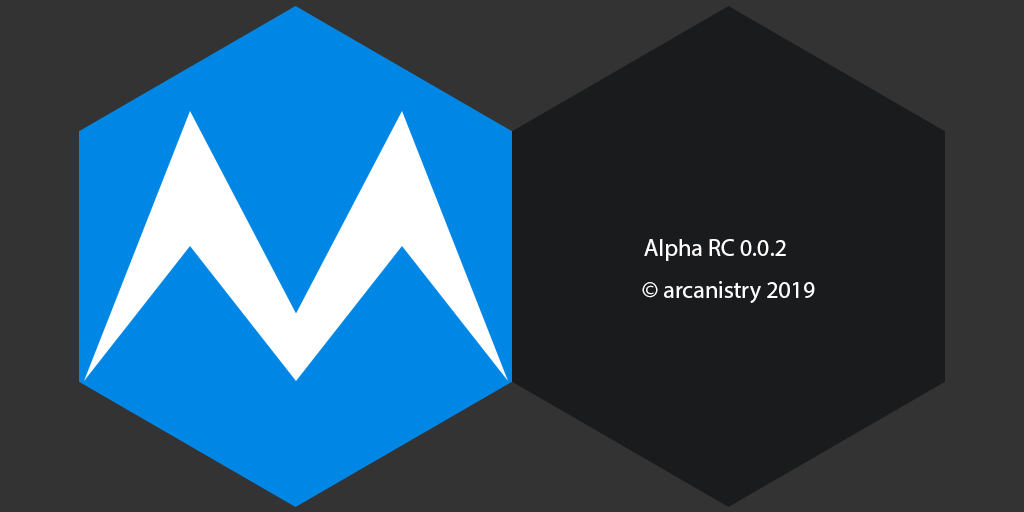
<style>
.page{position:relative;width:1024px;height:512px;background:#333333}
.page>*{position:absolute;margin:0}
.t1{font:24px "MyriadPro-Regular";color:#ffffff}
</style>
<div class="page">
<p class="t1" style="left:644px;top:239px;width:142px;height:22px">Alpha RC 0.0.2</p>
<p class="t1" style="left:642px;top:281px;width:173px;height:22px">© arcanistry 2019</p>
</div>
